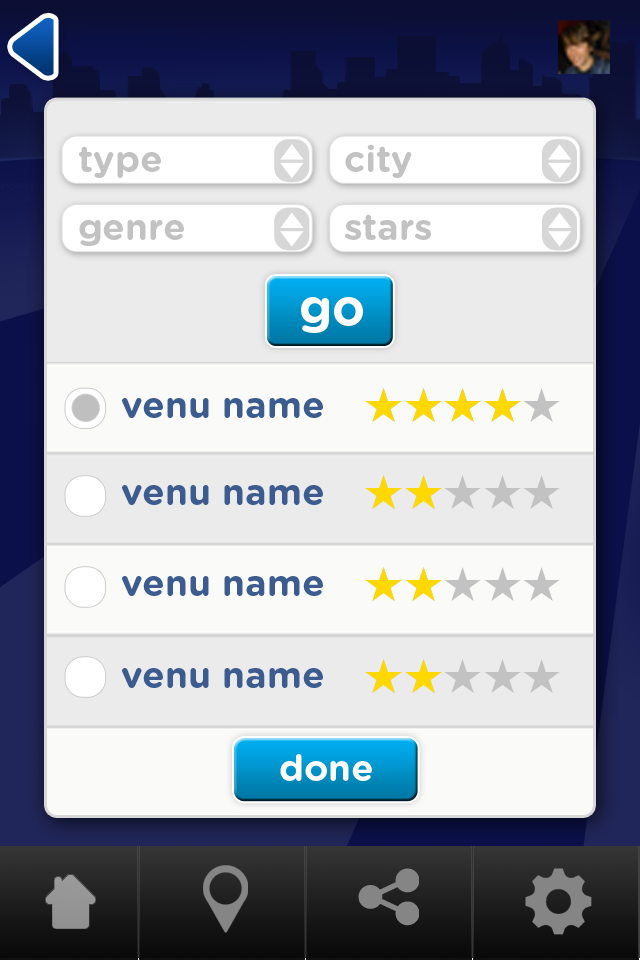
<style>
.page{position:relative;width:640px;height:960px;background:#ebebeb}
.page>*{position:absolute;margin:0}
.t1{font:37px "GothamRounded-Bold";color:#c2c2c2}
.t2{font:49.5px "GothamRounded-Bold";color:#ffffff}
.t3{font:37px "GothamRounded-Bold";color:#3c5c8f}
.t4{font:36.9px "GothamRounded-Bold";color:#ffffff}
</style>
<div class="page">
<p class="t1" style="left:79px;top:146px;width:82px;height:32px">type</p>
<p class="t1" style="left:345px;top:144px;width:67px;height:34px">city</p>
<p class="t1" style="left:79px;top:220px;width:105px;height:26px">genre</p>
<p class="t1" style="left:345px;top:214px;width:86px;height:26px">stars</p>
<p class="t2" style="left:301px;top:297px;width:62px;height:36px">go</p>
<p class="t3" style="left:122px;top:398px;width:201px;height:20px">venu name</p>
<p class="t3" style="left:122px;top:485px;width:201px;height:20px">venu name</p>
<p class="t3" style="left:122px;top:576px;width:201px;height:20px">venu name</p>
<p class="t3" style="left:122px;top:668px;width:201px;height:20px">venu name</p>
<p class="t4" style="left:280px;top:754px;width:92px;height:27px">done</p>
</div>
